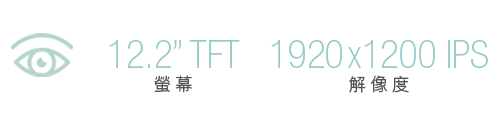
<style>
.page{position:relative;width:500px;height:120px;background:#ffffff}
.page>*{position:absolute;margin:0}
.t1{font:38.9px/19.4px "HelveticaNeue-ThinCond";color:#96cbc7}
.t2{font:18.1px/22.2px "MHeiHK-Medium";letter-spacing:0.2em;color:#555555}
.t3{font:38.9px/19.4px "HelveticaNeue-ThinCond";letter-spacing:0.1em;color:#96cbc7}
</style>
<div class="page">
<p class="t1" style="left:109px;top:40px;width:131px;height:53px;text-align:center">12.2” TFT<br><span class="t2">螢幕</span></p>
<p class="t1" style="left:271px;top:40px;width:217px;height:53px;text-align:center">192<span class="t3">0</span>x1200 IPS<br><span class="t2">解像度</span></p>
</div>
